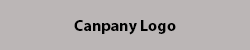
<style>
.page{position:relative;width:250px;height:50px;background:#bbb6b6}
.page>*{position:absolute;margin:0}
.t1{font:16px "MyriadPro-Bold";color:#000000}
</style>
<div class="page">
<p class="t1" style="left:74px;top:20px;width:102px;height:15px">Canpany Logo</p>
</div>
